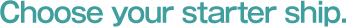
<style>
.page{position:relative;width:357px;height:27px;background:#ffffff}
.page>*{position:absolute;margin:0}
.t1{font:28px "GothicMB101Pro-DeBold";letter-spacing:-0.04em;color:#409e9f;scale:0.95 1}
</style>
<div class="page">
<p class="t1" style="left:0px;top:0px;width:346px;height:27px">Choose your starter ship.</p>
</div>
